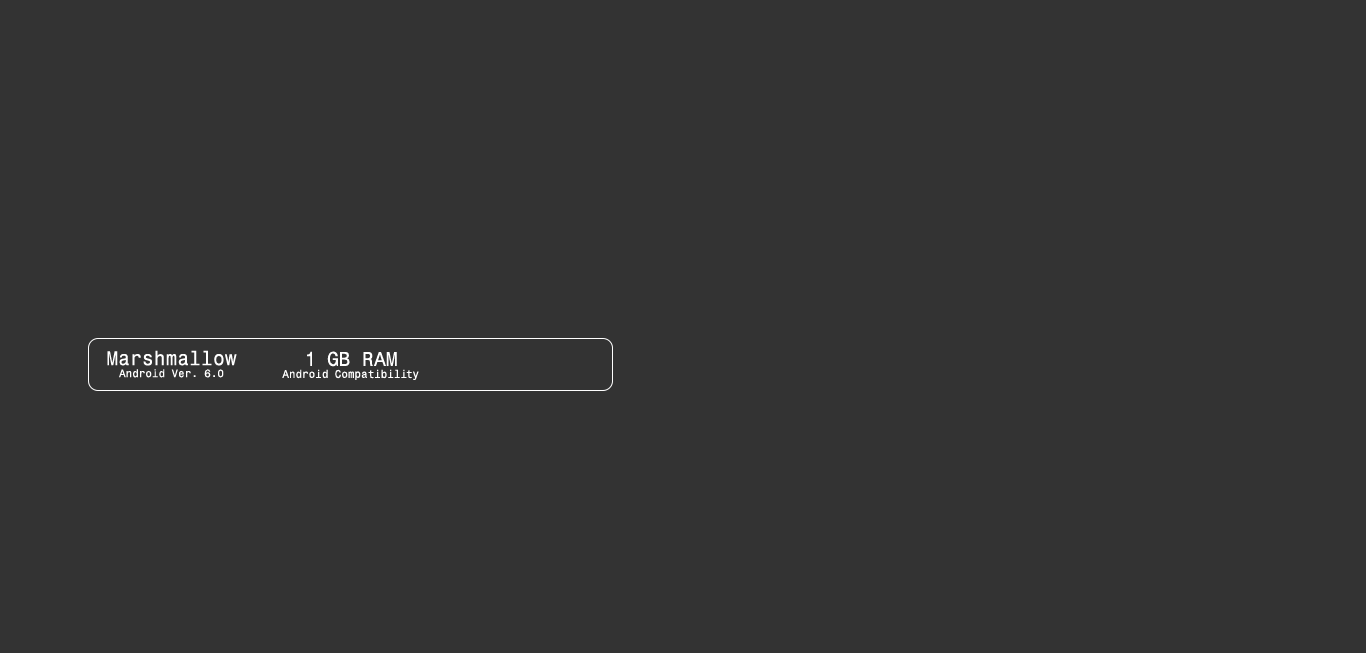
<style>
.page{position:relative;width:1366px;height:653px;background:#333333}
.page>*{position:absolute;margin:0}
.t1{font:10px "MonospaceTypewriter";color:#ffffff;scale:1.12 1}
.t2{font:18px "MonospaceTypewriter";color:#ffffff;scale:1.12 1}
</style>
<div class="page">
<p class="t1" style="left:107px;top:350px;width:130px;height:28px;text-align:center"><span class="t2">Marshmallow<br></span>Android Ver. 6.0</p>
<p class="t1" style="left:282px;top:351px;width:137px;height:29px;text-align:center"><span class="t2">1 GB RAM<br></span>Android Compatibility</p>
</div>
